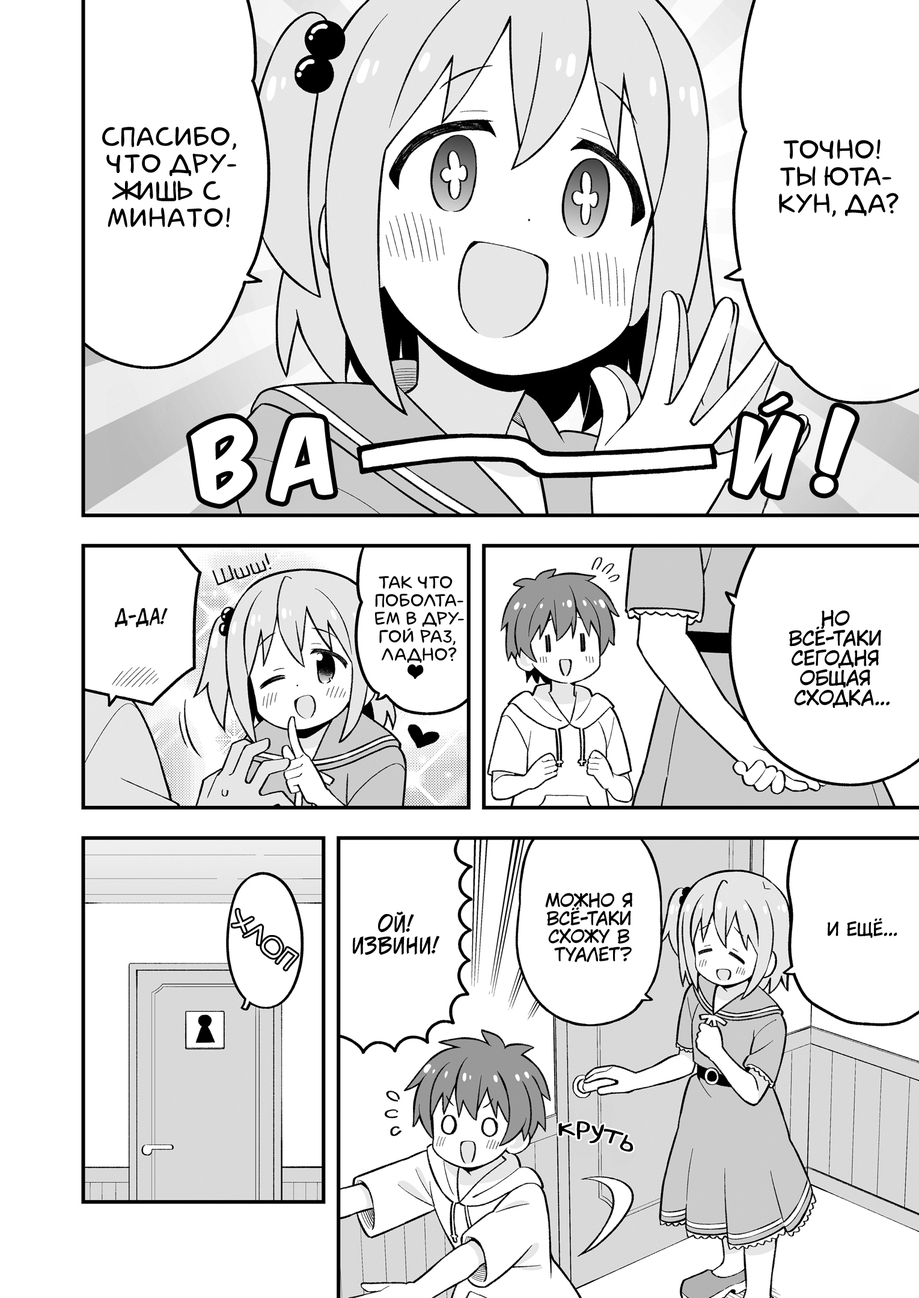
<style>
.page{position:relative;width:919px;height:1298px;background:#ffffff}
.page>*{position:absolute;margin:0}
.t1{font:27px "laCartoonerie";color:#000000;text-transform:uppercase}
.t2{font:90.1px "KomikaTitle-AxisRUS-LAT";color:#ffffff}
.t3{font:21.6px "v_Augie";color:#000000}
.t4{font:18px "laCartoonerie";color:#000000;text-transform:uppercase}
.t5{font:18px "KuraiVoice2";color:#000000;text-transform:uppercase}
.t6{font:19.8px "v_CCJeffCampbell";color:#000000;text-transform:uppercase}
.t7{font:19.8px "KuraiVoice2";color:#000000;text-transform:uppercase}
.t8{font:21.6px "v_CCJeffCampbell";color:#000000;text-transform:uppercase}
.t9{font:28.8px "v_Augie";color:#000000}
</style>
<div class="page">
<p class="t1" style="left:102px;top:127px;width:134px;height:101px;text-align:center">Спасибо,<br>что дру-<br>жишь с<br>Минато!</p>
<p class="t1" style="left:779px;top:139px;width:119px;height:78px;text-align:center">Точно!<br>Ты Юта-<br>кун, да?</p>
<p class="t2" style="left:732px;top:395px;width:68px;height:101px;rotate:1deg">й</p>
<p class="t2" style="left:814px;top:407px;width:41px;height:87px;rotate:3deg">!</p>
<p class="t2" style="left:190px;top:418px;width:63px;height:86px;rotate:-14deg">в</p>
<p class="t2" style="left:270px;top:417px;width:63px;height:85px;rotate:-9deg">а</p>
<p class="t3" style="left:212px;top:553px;width:60px;height:33px;rotate:-17deg">Шшш!</p>
<p class="t4" style="left:375px;top:576px;width:89px;height:103px;text-align:center">Так что<br>поболта-<br>ем в дру-<br>гой раз,<br>ладно?<br><span class="t5">♥</span></p>
<p class="t6" style="left:115px;top:607px;width:53px;height:20px">Д-да!</p>
<p class="t7" style="left:788px;top:610px;width:101px;height:98px;text-align:center">Но<br>всё-таки<br>сегодня<br>общая<br>сходка...</p>
<p class="t5" style="left:545px;top:892px;width:87px;height:70px;text-align:center">Можно я<br>всё-таки<br>схожу в<br>туалет?</p>
<p class="t8" style="left:353px;top:911px;width:87px;height:44px;text-align:center">Ой!<br>Извини!</p>
<p class="t5" style="left:827px;top:918px;width:70px;height:20px">И ещё...</p>
<p class="t9" style="left:558px;top:1121px;width:75px;height:31px;rotate:15deg">круть</p>
</div>
